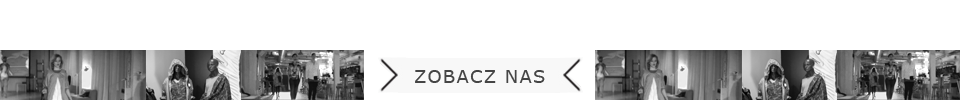
<style>
.page{position:relative;width:960px;height:100px;background:#ffffff}
.page>*{position:absolute;margin:0}
.t1{font:18.4px "Verdana";letter-spacing:0.05em;color:#454545}
.t2{font:18.4px "Verdana";letter-spacing:0.05em;color:#454545;text-transform:uppercase}
</style>
<div class="page">
<p class="t1" style="left:415px;top:70px;width:130px;height:13px"><span class="t2">z</span>OBACZ NAS</p>
</div>
